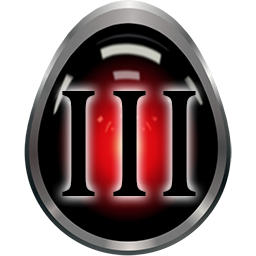
<style>
.page{position:relative;width:256px;height:256px;background:#ffffff}
.page>*{position:absolute;margin:0}
.t1{font:157px "CambriaMath";color:#000000}
</style>
<div class="page">
<p class="t1" style="left:62px;top:91px;width:134px;height:105px">III</p>
</div>
